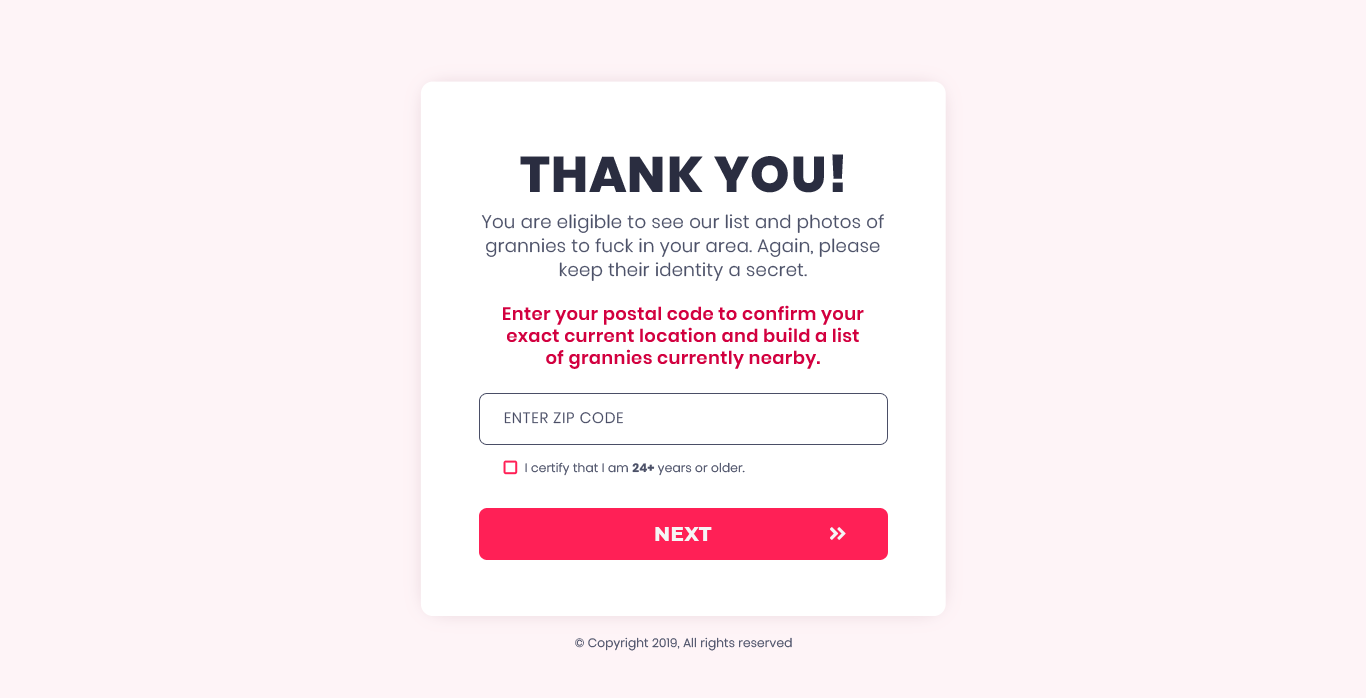
<style>
.page{position:relative;width:1366px;height:698px;background:#fef4f7}
.page>*{position:absolute;margin:0}
.t1{font:50px "Poppins-ExtraBold";letter-spacing:0.02em;color:#2a2d40}
.t2{font:18px/24px "Poppins-Light";letter-spacing:0.02em;color:#4c5168}
.t3{font:18px/22px "Poppins-SemiBold";letter-spacing:0.02em;color:#d2003f}
.t4{font:15px "Poppins-Light";letter-spacing:0.05em;color:#4a4e66;text-transform:uppercase}
.t5{font:12px "Poppins-Light";letter-spacing:0.02em;color:#4c5168}
.t6{font:12px "Poppins-Bold";letter-spacing:0.02em;color:#4c5168}
.t7{font:20px "Montserrat-ExtraBold";letter-spacing:0.02em;color:#f5f5f5}
</style>
<div class="page">
<p class="t1" style="left:520px;top:154px;width:323px;height:39px">THANK YOU!</p>
<p class="t2" style="left:481px;top:214px;width:403px;height:67px;text-align:center">You are eligible to see our list and photos of grannies to fuck in your area. Again, please keep their identity a secret.</p>
<p class="t3" style="left:503px;top:305px;width:361px;height:64px;text-align:center">Enter your postal code to confirm your exact current location and build a list of grannies currently nearby.</p>
<p class="t4" style="left:504px;top:412px;width:119px;height:12px">Enter Zip Code</p>
<p class="t5" style="left:525px;top:462px;width:220px;height:14px">I certify that I am <span class="t6">24+</span> years or older.</p>
<p class="t7" style="left:655px;top:527px;width:57px;height:14px">NEXT</p>
<p class="t5" style="left:575px;top:637px;width:217px;height:14px">© Copyright 2019, All rights reserved</p>
</div>
